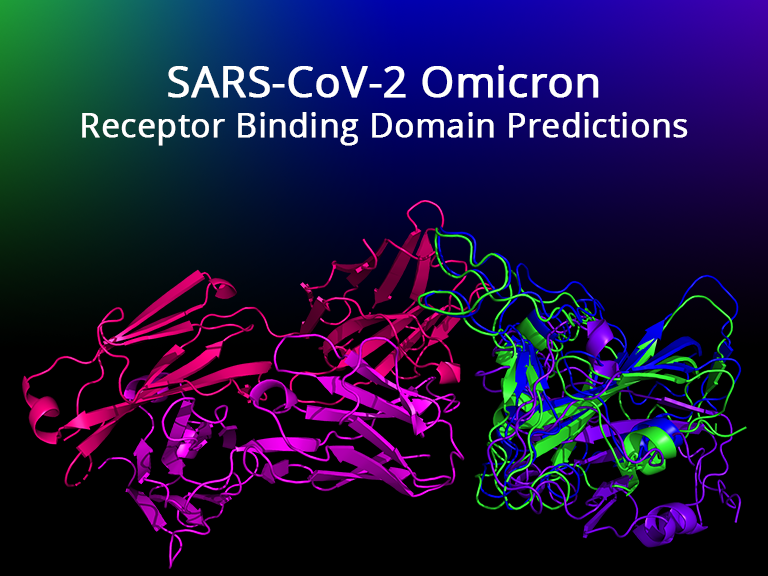
<style>
.page{position:relative;width:768px;height:576px;background:#000000}
.page>*{position:absolute;margin:0}
.t1{font:33.2px "OpenSans-Regular";color:#ffffff;font-weight:bold}
.t2{font:42.7px "OpenSans-Regular";color:#ffffff;font-weight:bold}
</style>
<div class="page">
<p class="t1" style="left:82px;top:65px;width:606px;height:81px;text-align:center"><span class="t2">SARS-CoV-2 Omicron<br></span>Receptor Binding Domain Predictions</p>
</div>
